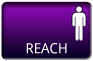
<style>
.page{position:relative;width:93px;height:61px}
.page>*{position:absolute;margin:0}
.t1{font:14px "DroidSans";color:#ffffff}
</style>
<div class="page">
<p class="t1" style="left:26px;top:43px;width:41px;height:11px">REACH</p>
</div>
